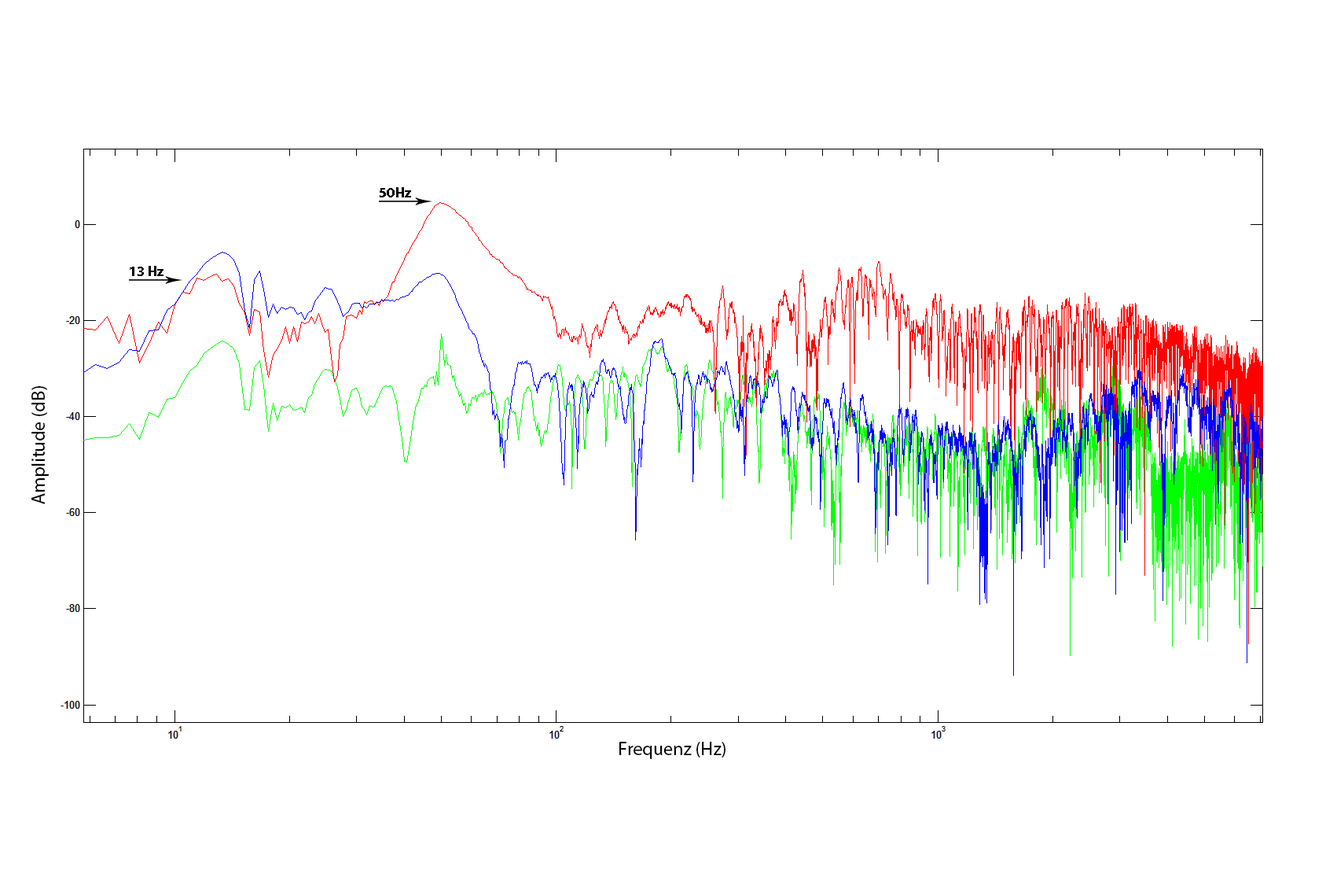
<style>
.page{position:relative;width:1337px;height:892px;background:#ffffff}
.page>*{position:absolute;margin:0}
.t1{font:14.2px "MyriadPro-Bold";color:#000000}
.t2{font:18.9px "MyriadPro-Regular";color:#000000}
</style>
<div class="page">
<p class="t1" style="left:380px;top:187px;width:31px;height:10px">50Hz</p>
<p class="t1" style="left:130px;top:266px;width:34px;height:10px">13 Hz</p>
<p class="t2" style="left:31px;top:386px;width:18px;height:118px;rotate:-90deg">Amplitude (dB)</p>
<p class="t2" style="left:620px;top:741px;width:106px;height:18px">Frequenz (Hz)</p>
</div>
